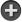
<style>
.page{position:relative;width:22px;height:22px}
.page>*{position:absolute;margin:0}
.t1{font:23px "HelveticaNeue-Bold";color:#e5e4e4;font-weight:bold}
</style>
<div class="page">
<p class="t1" style="left:5px;top:4px;width:13px;height:13px">+</p>
</div>
